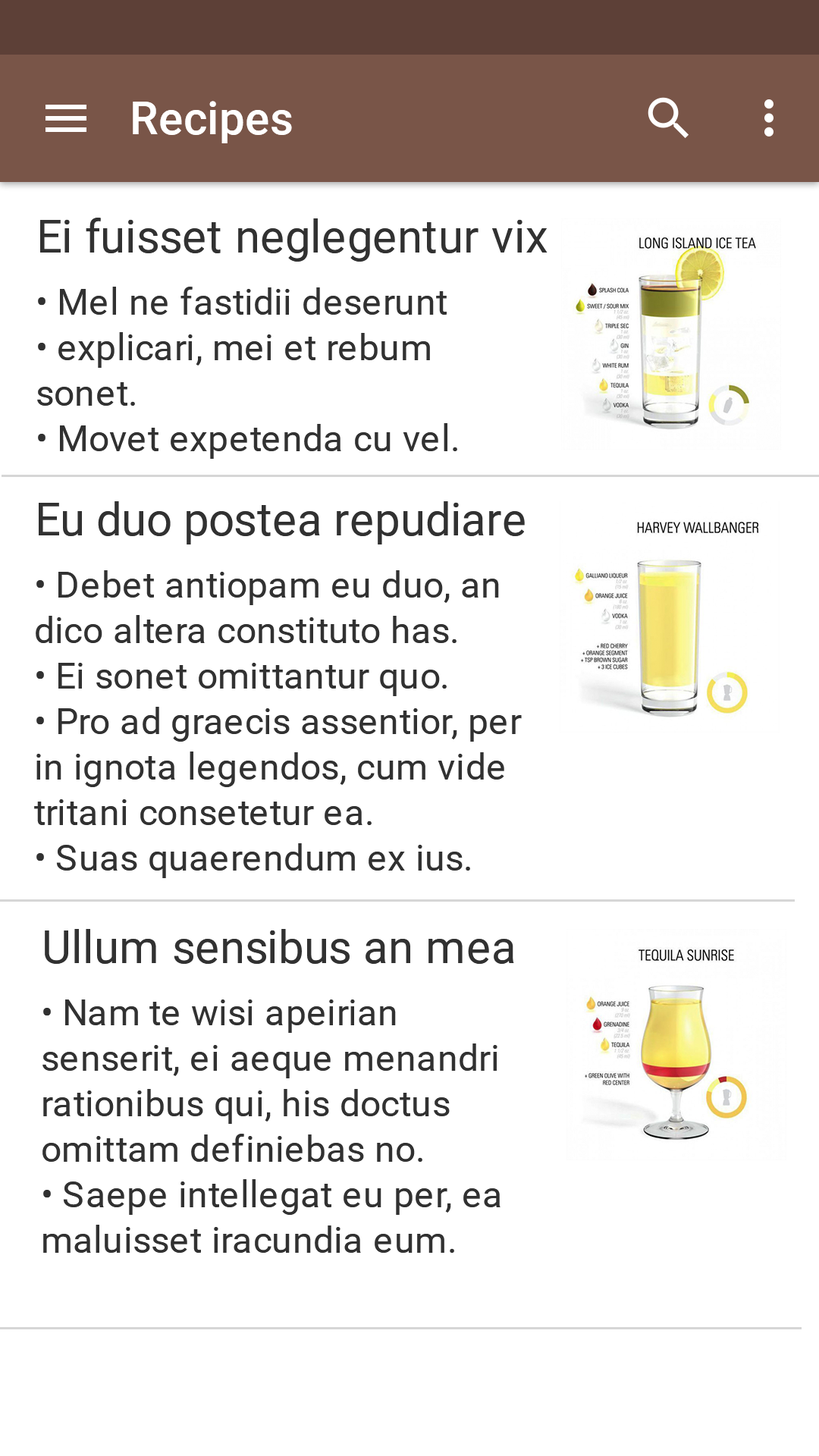
<style>
.page{position:relative;width:819px;height:1456px;background:#ffffff}
.page>*{position:absolute;margin:0}
.t1{font:45.5px "Roboto-Medium";letter-spacing:0.005em;color:#ffffff}
.t2{font:45.5px "Roboto-Regular";letter-spacing:0.005em;color:#313131}
.t3{font:36.4px/45.5px "Roboto-Regular";letter-spacing:0.01em;color:#313131}
</style>
<div class="page">
<p class="t1" style="left:133px;top:101px;width:159px;height:42px">Recipes</p>
<p class="t2" style="left:40px;top:218px;width:508px;height:44px">Ei fuisset neglegentur vix</p>
<p class="t3" style="left:37px;top:287px;width:420px;height:172px">• Mel ne fastidii deserunt <br>• explicari, mei et rebum sonet. <br>• Movet expetenda cu vel.</p>
<p class="t2" style="left:39px;top:501px;width:486px;height:43px">Eu duo postea repudiare</p>
<p class="t3" style="left:34px;top:570px;width:488px;height:308px">• Debet antiopam eu duo, an dico altera constituto has.<br>• Ei sonet omittantur quo.<br>• Pro ad graecis assentior, per in ignota legendos, cum vide tritani consetetur ea. <br>• Suas quaerendum ex ius.</p>
<p class="t2" style="left:45px;top:929px;width:469px;height:35px">Ullum sensibus an mea</p>
<p class="t3" style="left:42px;top:999px;width:458px;height:254px">• Nam te wisi apeirian senserit, ei aeque menandri rationibus qui, his doctus omittam definiebas no. <br>• Saepe intellegat eu per, ea maluisset iracundia eum.</p>
</div>
